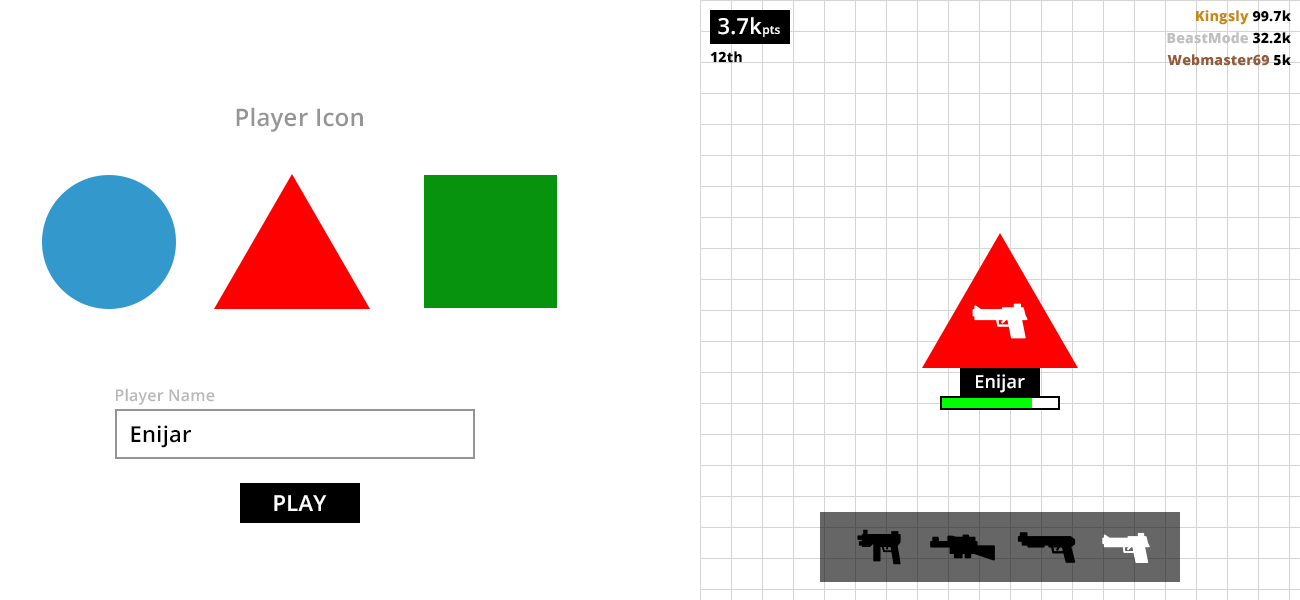
<style>
.page{position:relative;width:1300px;height:600px;background:#ffffff}
.page>*{position:absolute;margin:0}
.t1{font:22px "OpenSans-SemiBold";letter-spacing:0.01em;color:#ffffff}
.t2{font:12px "OpenSans-SemiBold";letter-spacing:0.01em;color:#ffffff}
.t3{font:14px/22px "OpenSans-ExtraBold";letter-spacing:0.01em;color:#955a38}
.t4{font:14px/22px "OpenSans-ExtraBold";letter-spacing:0.01em;color:#c98910}
.t5{font:14px/22px "OpenSans-ExtraBold";letter-spacing:0.01em;color:#000000}
.t6{font:14px/22px "OpenSans-ExtraBold";letter-spacing:0.01em;color:#c0c0c0}
.t7{font:14px "OpenSans-ExtraBold";letter-spacing:0.01em;color:#000000}
.t8{font:24px "OpenSans-SemiBold";letter-spacing:0.01em;color:#959595}
.t9{font:18px "OpenSans-SemiBold";letter-spacing:0.01em;color:#ffffff}
.t10{font:16px "OpenSans-SemiBold";letter-spacing:0.01em;color:#b8b8b8}
.t11{font:22px "OpenSans-SemiBold";letter-spacing:0.01em;color:#000000}
</style>
<div class="page">
<p class="t1" style="left:718px;top:17px;width:62px;height:20px">3.7k<span class="t2">pts</span></p>
<p class="t3" style="left:1167px;top:10px;width:124px;height:56px;text-align:right"><span class="t4">Kingsly</span><span class="t5"> 99.7k<br></span><span class="t6">BeastMode</span><span class="t5"> 32.2k<br></span>Webmaster69<span class="t5"> 5k</span></p>
<p class="t7" style="left:710px;top:51px;width:32px;height:12px">12th</p>
<p class="t8" style="left:236px;top:107px;width:127px;height:25px">Player Icon</p>
<p class="t9" style="left:976px;top:374px;width:49px;height:19px">Enijar</p>
<p class="t10" style="left:116px;top:388px;width:99px;height:17px">Player Name</p>
<p class="t11" style="left:131px;top:425px;width:60px;height:23px">Enijar</p>
<p class="t1" style="left:274px;top:495px;width:53px;height:16px">PLAY</p>
</div>
